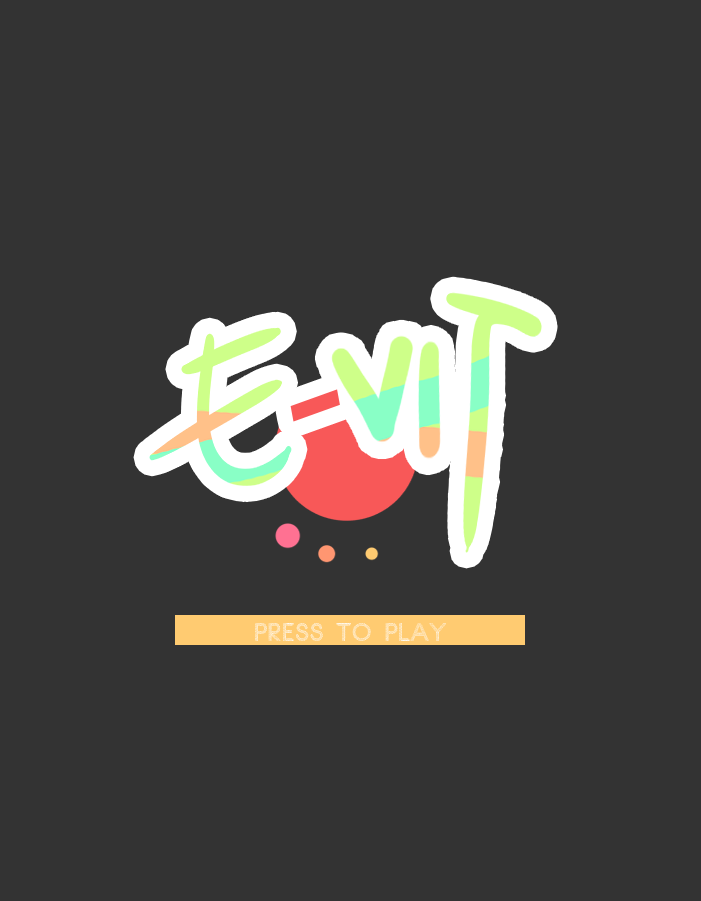
<style>
.page{position:relative;width:701px;height:901px;background:#333333}
.page>*{position:absolute;margin:0}
.t1{font:24px "GlyphStitchv4";color:#ffffff}
</style>
<div class="page">
<p class="t1" style="left:255px;top:623px;width:191px;height:18px">press to play</p>
</div>
